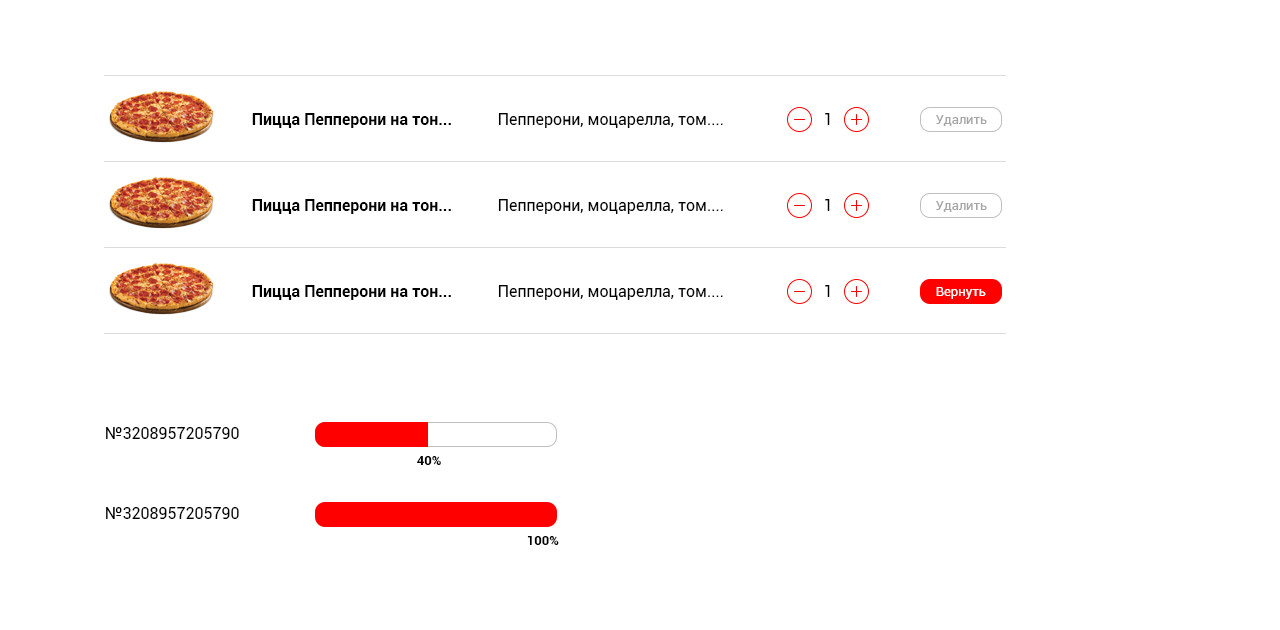
<style>
.page{position:relative;width:1280px;height:630px;background:#ffffff}
.page>*{position:absolute;margin:0}
.t1{font:16px "Roboto-Bold";color:#000000}
.t2{font:16px "Roboto-Regular";color:#000000}
.t3{font:13px "Roboto-Regular";color:#a6a6a6}
.t4{font:13px "Roboto-Regular";color:#ffffff}
.t5{font:13px "Roboto-Bold";color:#000000}
</style>
<div class="page">
<p class="t1" style="left:252px;top:113px;width:199px;height:15px">Пицца Пепперони на тон...</p>
<p class="t2" style="left:498px;top:113px;width:225px;height:15px">Пепперони, моцарелла, том....</p>
<p class="t2" style="left:825px;top:113px;width:5px;height:12px">1</p>
<p class="t3" style="left:936px;top:115px;width:51px;height:11px">Удалить</p>
<p class="t1" style="left:252px;top:199px;width:199px;height:15px">Пицца Пепперони на тон...</p>
<p class="t2" style="left:498px;top:199px;width:225px;height:15px">Пепперони, моцарелла, том....</p>
<p class="t2" style="left:825px;top:199px;width:5px;height:12px">1</p>
<p class="t3" style="left:936px;top:201px;width:51px;height:11px">Удалить</p>
<p class="t1" style="left:252px;top:285px;width:199px;height:15px">Пицца Пепперони на тон...</p>
<p class="t2" style="left:498px;top:285px;width:225px;height:15px">Пепперони, моцарелла, том....</p>
<p class="t2" style="left:825px;top:285px;width:5px;height:12px">1</p>
<p class="t4" style="left:936px;top:287px;width:50px;height:12px">Вернуть</p>
<p class="t2" style="left:106px;top:427px;width:133px;height:12px">№3208957205790</p>
<p class="t5" style="left:417px;top:456px;width:24px;height:9px">40%</p>
<p class="t2" style="left:106px;top:507px;width:133px;height:12px">№3208957205790</p>
<p class="t5" style="left:527px;top:536px;width:32px;height:9px">100%</p>
</div>
